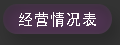
<style>
.page{position:relative;width:120px;height:45px}
.page>*{position:absolute;margin:0}
.t1{font:16px "SimHei";color:#fffdfd;scale:0.95 1}
</style>
<div class="page">
<p class="t1" style="left:19px;top:12px;width:77px;height:15px">经营情况表</p>
</div>
